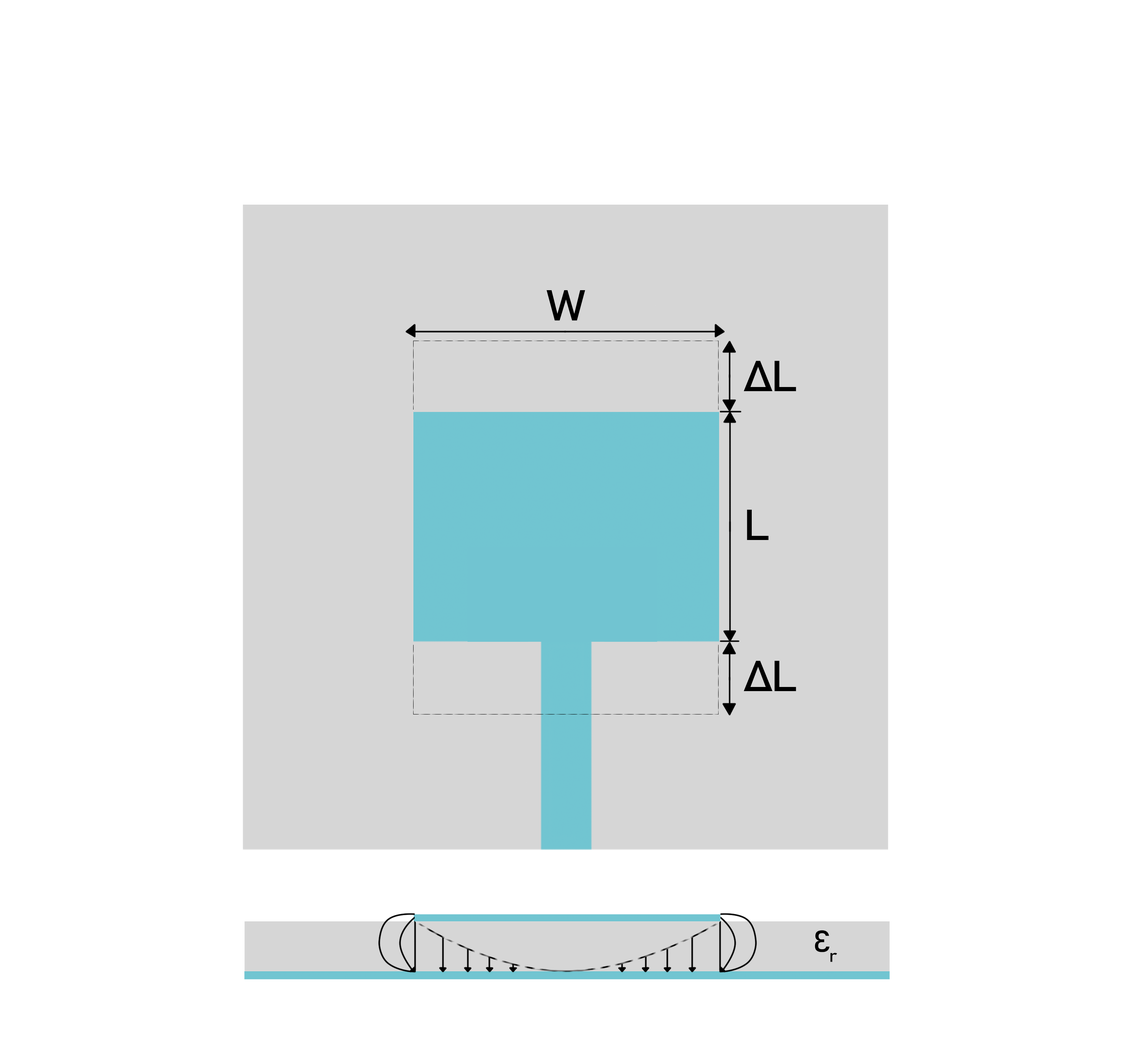
<style>
.page{position:relative;width:1131px;height:1054px;background:#ffffff}
.page>*{position:absolute;margin:0}
.t1{font:42.6px "Bahnschrift";letter-spacing:-0.06em;color:#000000;font-weight:bold;font-style:italic;scale:1.1 1}
.t2{font:30.1px "Bahnschrift";letter-spacing:-0.06em;color:#000000;font-weight:bold;font-style:italic;scale:1.1 1}
</style>
<div class="page">
<p class="t1" style="left:547px;top:290px;width:38px;height:31px">W</p>
<p class="t1" style="left:744px;top:361px;width:52px;height:30px">ΔL</p>
<p class="t1" style="left:747px;top:510px;width:22px;height:30px">L</p>
<p class="t1" style="left:744px;top:661px;width:52px;height:30px">ΔL</p>
<p class="t2" style="left:815px;top:930px;width:22px;height:32px">Ɛr</p>
</div>
